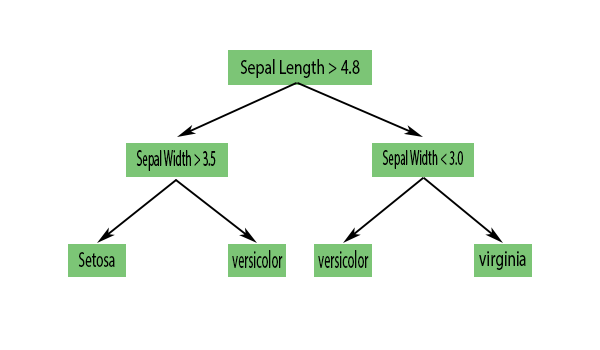
<style>
.page{position:relative;width:600px;height:350px;background:#ffffff}
.page>*{position:absolute;margin:0}
.t1{font:20.7px "MyriadPro-Regular";color:#030303;scale:0.75 1}
.t2{font:22.5px "MyriadPro-Regular";color:#030303;scale:0.49 1}
.t3{font:21.1px "MyriadPro-Regular";color:#030303;scale:0.53 1}
.t4{font:21.3px "MyriadPro-Regular";color:#030303;scale:0.63 1}
.t5{font:24.5px "MyriadPro-Regular";color:#030303;scale:0.5 1}
.t6{font:22.3px "MyriadPro-Regular";color:#030303;scale:0.69 1}
</style>
<div class="page">
<p class="t1" style="left:240px;top:59px;width:120px;height:19px">Sepal Length &gt; 4.8</p>
<p class="t2" style="left:136px;top:150px;width:80px;height:21px">Sepal Width &gt; 3.5</p>
<p class="t3" style="left:382px;top:150px;width:81px;height:19px">Sepal Width &lt; 3.0</p>
<p class="t4" style="left:78px;top:252px;width:37px;height:15px">Setosa</p>
<p class="t5" style="left:232px;top:250px;width:51px;height:18px">versicolor</p>
<p class="t5" style="left:318px;top:250px;width:51px;height:18px">versicolor</p>
<p class="t6" style="left:479px;top:251px;width:47px;height:19px">virginia</p>
</div>
